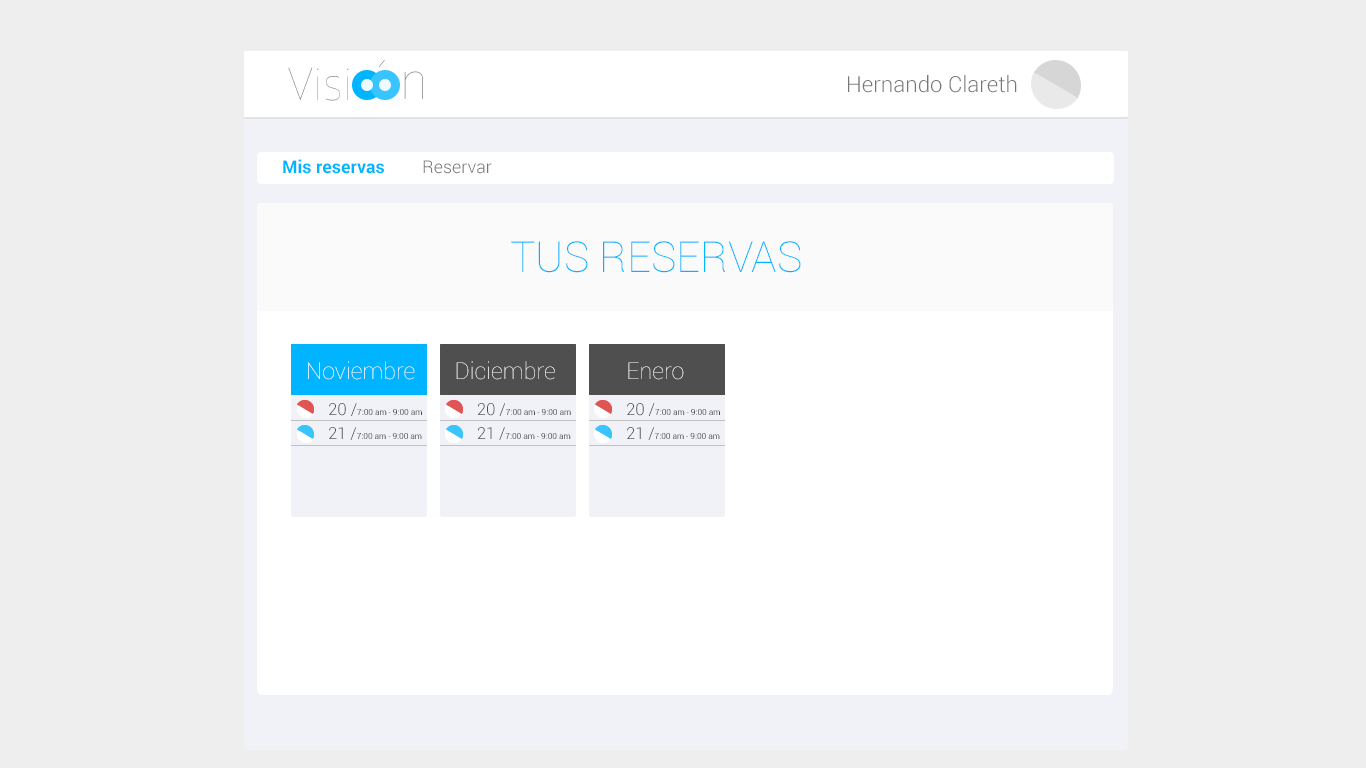
<style>
.page{position:relative;width:1366px;height:768px;background:#eeeeee}
.page>*{position:absolute;margin:0}
.t1{font:44.7px "GloberThinFree"}
.t2{font:44.7px "GloberThinFree";color:#777777}
.t3{font:51.2px "GloberThinFree";color:#777777}
.t4{font:22.2px "Roboto-Light";color:#777777}
.t5{font:17.8px "Roboto-Bold";color:#00b4ff}
.t6{font:17.8px "Roboto-Light";color:#777777}
.t7{font:42.4px "Roboto-Thin";color:#00b4ff}
.t8{font:23.3px "Roboto-Thin";color:#ffffff}
.t9{font:23.3px "Roboto-Thin"}
.t10{font:8.3px "Roboto-Regular";color:#4a4a4a}
.t11{font:16.6px "Roboto-Light";color:#4a4a4a}
.t12{font:8.3px "Roboto-Regular"}
.t13{font:16.6px "Roboto-Light"}
</style>
<div class="page">
<p class="t1" style="left:378px;top:60px;width:7px;height:8px">´</p>
<p class="t2" style="left:288px;top:67px;width:61px;height:34px">Visi</p>
<p class="t3" style="left:404px;top:71px;width:19px;height:28px">n</p>
<p class="t4" style="left:848px;top:75px;width:169px;height:18px">Hernando Clareth</p>
<p class="t5" style="left:283px;top:159px;width:101px;height:15px">Mis reservas</p>
<p class="t6" style="left:423px;top:160px;width:69px;height:14px">Reservar</p>
<p class="t7" style="left:511px;top:241px;width:290px;height:32px">TUS RESERVAS</p>
<p class="t8" style="left:308px;top:361px;width:107px;height:19px">Noviembre</p>
<p class="t8" style="left:308px;top:361px;width:107px;height:19px">Noviembre</p>
<p class="t9" style="left:456px;top:361px;width:99px;height:19px">Diciembre</p>
<p class="t8" style="left:628px;top:362px;width:56px;height:18px">Enero</p>
<p class="t10" style="left:329px;top:403px;width:93px;height:13px"><span class="t11">20 /</span>7:00 am - 9:00 am</p>
<p class="t10" style="left:478px;top:403px;width:93px;height:13px"><span class="t11">20 /</span>7:00 am - 9:00 am</p>
<p class="t10" style="left:627px;top:403px;width:93px;height:13px"><span class="t11">20 /</span>7:00 am - 9:00 am</p>
<p class="t10" style="left:329px;top:427px;width:93px;height:13px"><span class="t11">21 /</span>7:00 am - 9:00 am</p>
<p class="t12" style="left:478px;top:427px;width:93px;height:13px"><span class="t13">21 /</span>7:00 am - 9:00 am</p>
<p class="t10" style="left:627px;top:427px;width:93px;height:13px"><span class="t11">21 /</span>7:00 am - 9:00 am</p>
</div>
